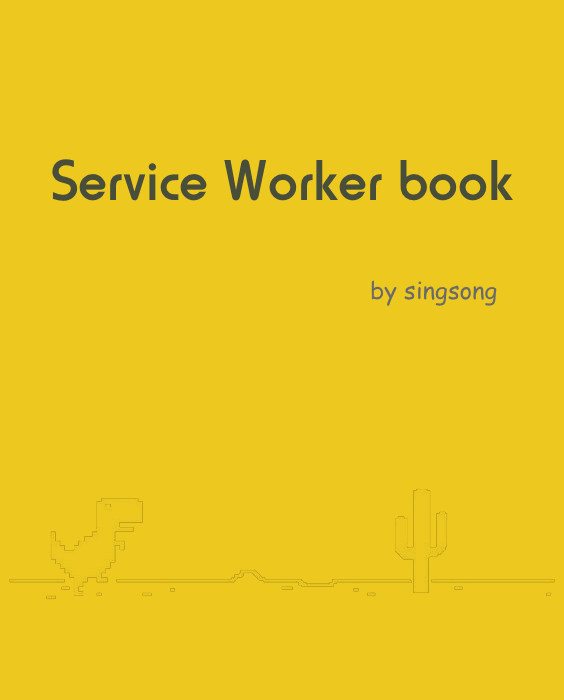
<style>
.page{position:relative;width:564px;height:700px;background:#edc920}
.page>*{position:absolute;margin:0}
.t1{font:60px "HoratioD-Medi";color:#484e3a}
.t2{font:24px "ComicSansMS";color:#6a6a6a}
</style>
<div class="page">
<p class="t1" style="left:52px;top:159px;width:461px;height:42px">Service Worker book</p>
<p class="t2" style="left:371px;top:280px;width:126px;height:26px">by singsong</p>
</div>
